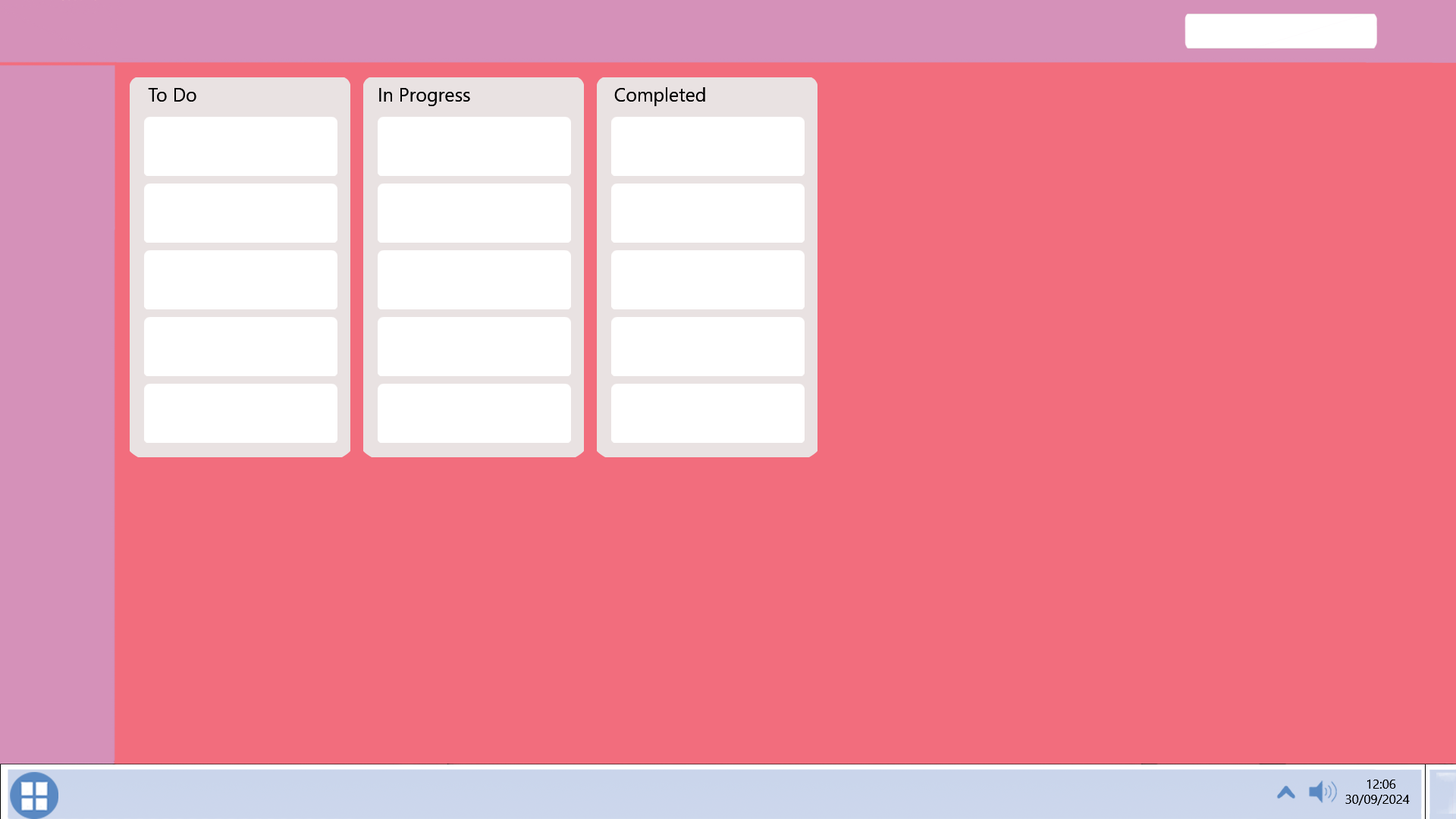
<style>
.page{position:relative;width:1456px;height:819px;background:#f26d7d}
.page>*{position:absolute;margin:0}
.t1{font:19px "SegoeUI";color:#000000}
</style>
<div class="page">
<p class="t1" style="left:148px;top:88px;width:48px;height:14px">To Do</p>
<p class="t1" style="left:379px;top:88px;width:91px;height:18px">In Progress</p>
<p class="t1" style="left:614px;top:87px;width:91px;height:19px">Completed</p>
</div>
